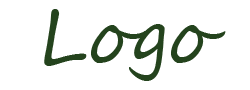
<style>
.page{position:relative;width:250px;height:90px;background:#ffffff}
.page>*{position:absolute;margin:0}
.t1{font:75px "SegoeScript";color:#24431d}
</style>
<div class="page">
<p class="t1" style="left:44px;top:9px;width:182px;height:72px">Logo</p>
</div>
